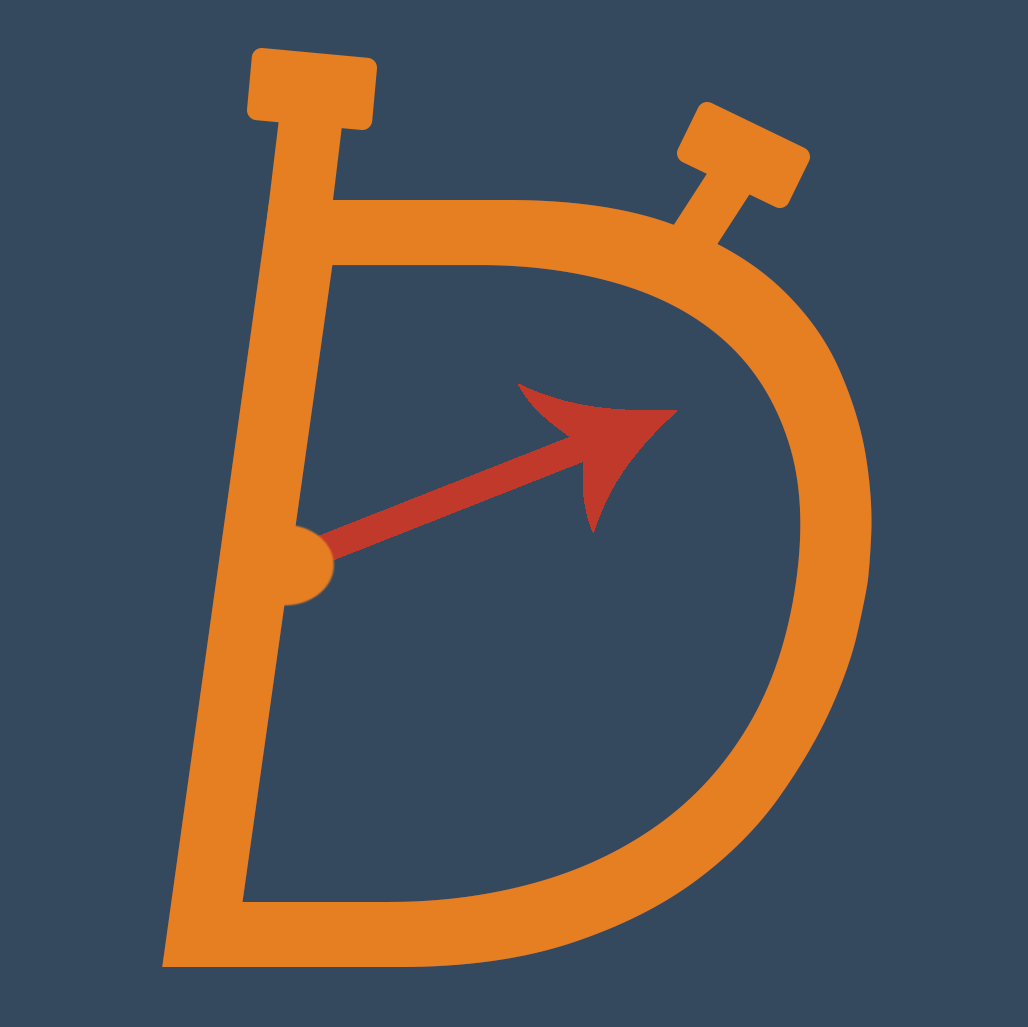
<style>
.page{position:relative;width:1028px;height:1027px;background:#34495e}
.page>*{position:absolute;margin:0}
.t1{font:1083.3px "Avenir-LightOblique";color:#e67e22}
</style>
<div class="page">
<p class="t1" style="left:162px;top:200px;width:710px;height:767px">D</p>
</div>
